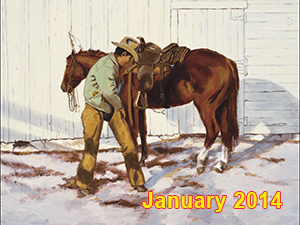
<style>
.page{position:relative;width:300px;height:225px}
.page>*{position:absolute;margin:0}
.t1{font:22.2px "Arial-BoldMT";letter-spacing:0.04em;color:#f6eb13;scale:0.93 1}
</style>
<div class="page">
<p class="t1" style="left:142px;top:192px;width:140px;height:20px">January 2014</p>
</div>
